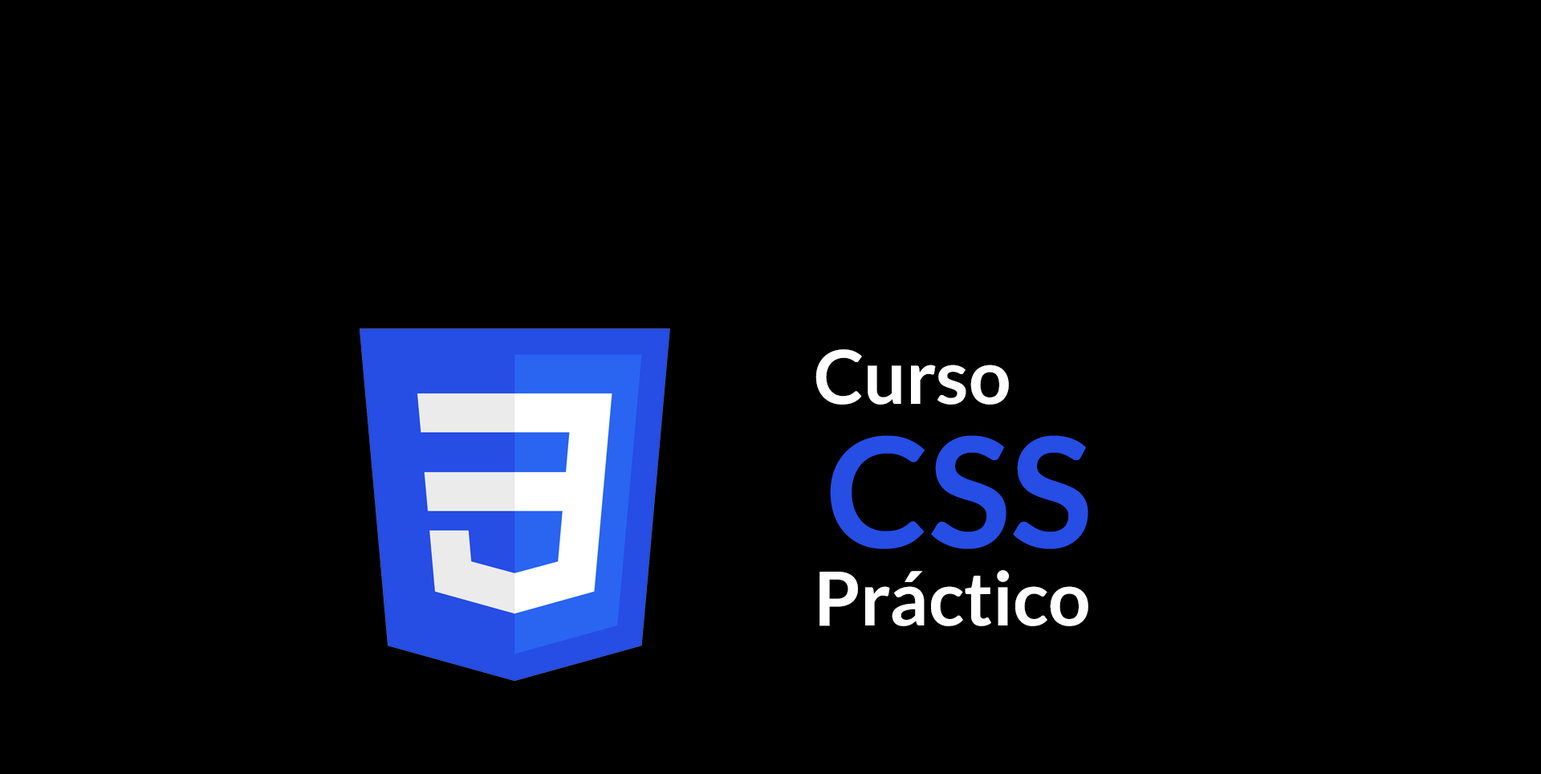
<style>
.page{position:relative;width:1541px;height:774px;background:#000000}
.page>*{position:absolute;margin:0}
.t1{font:74.3px "Lato-Bold";color:#ffffff}
.t2{font:152.8px "Lato-Bold";color:#264de4}
</style>
<div class="page">
<p class="t1" style="left:815px;top:349px;width:194px;height:56px">Curso</p>
<p class="t2" style="left:830px;top:435px;width:258px;height:114px">CSS</p>
<p class="t1" style="left:820px;top:570px;width:268px;height:56px">Práctico</p>
</div>
